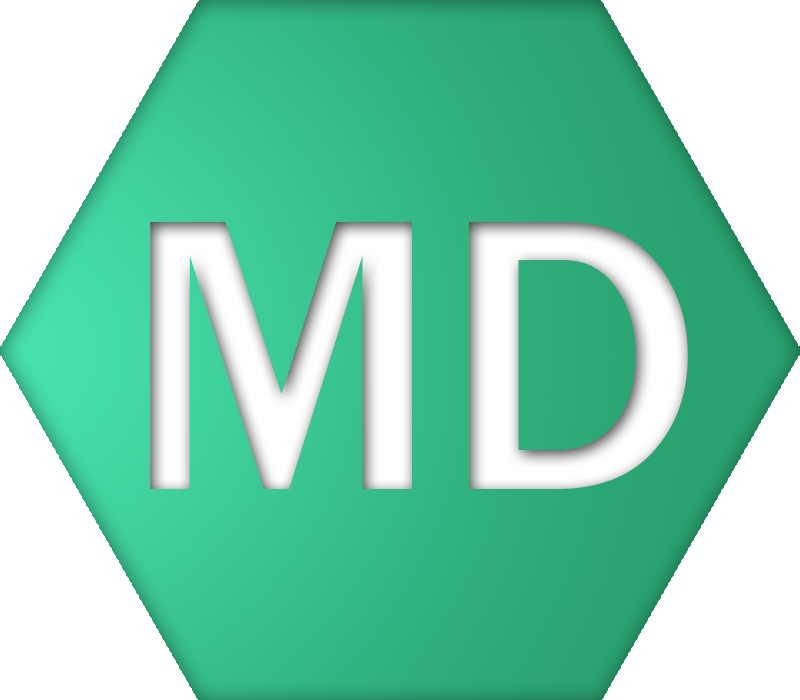
<style>
.page{position:relative;width:800px;height:700px;background:#ffffff}
.page>*{position:absolute;margin:0}
.t1{font:400px "FranklinGothic-Medium";color:#ffffff}
</style>
<div class="page">
<p class="t1" style="left:150px;top:221px;width:538px;height:268px">MD</p>
</div>
